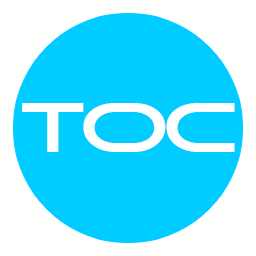
<style>
.page{position:relative;width:256px;height:256px;background:#00ccff}
.page>*{position:absolute;margin:0}
.t1{font:72px "GoodTimes";letter-spacing:-0.065em;color:#ffffff;scale:1.29 1}
</style>
<div class="page">
<p class="t1" style="left:22px;top:103px;width:213px;height:49px">TOC</p>
</div>
